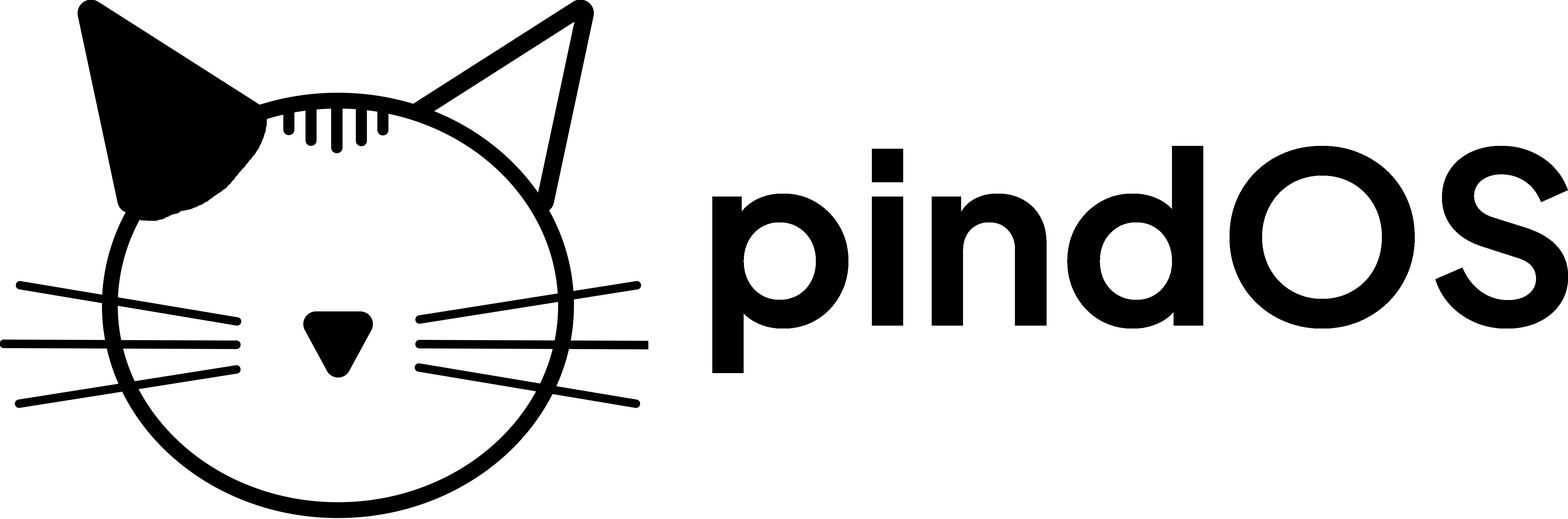
<style>
.page{position:relative;width:1568px;height:519px;background:#ffffff}
.page>*{position:absolute;margin:0}
.t1{font:237.4px "PlusJakartaSans-Bold";color:#000000}
</style>
<div class="page">
<p class="t1" style="left:712px;top:146px;width:856px;height:227px">pindOS</p>
</div>
